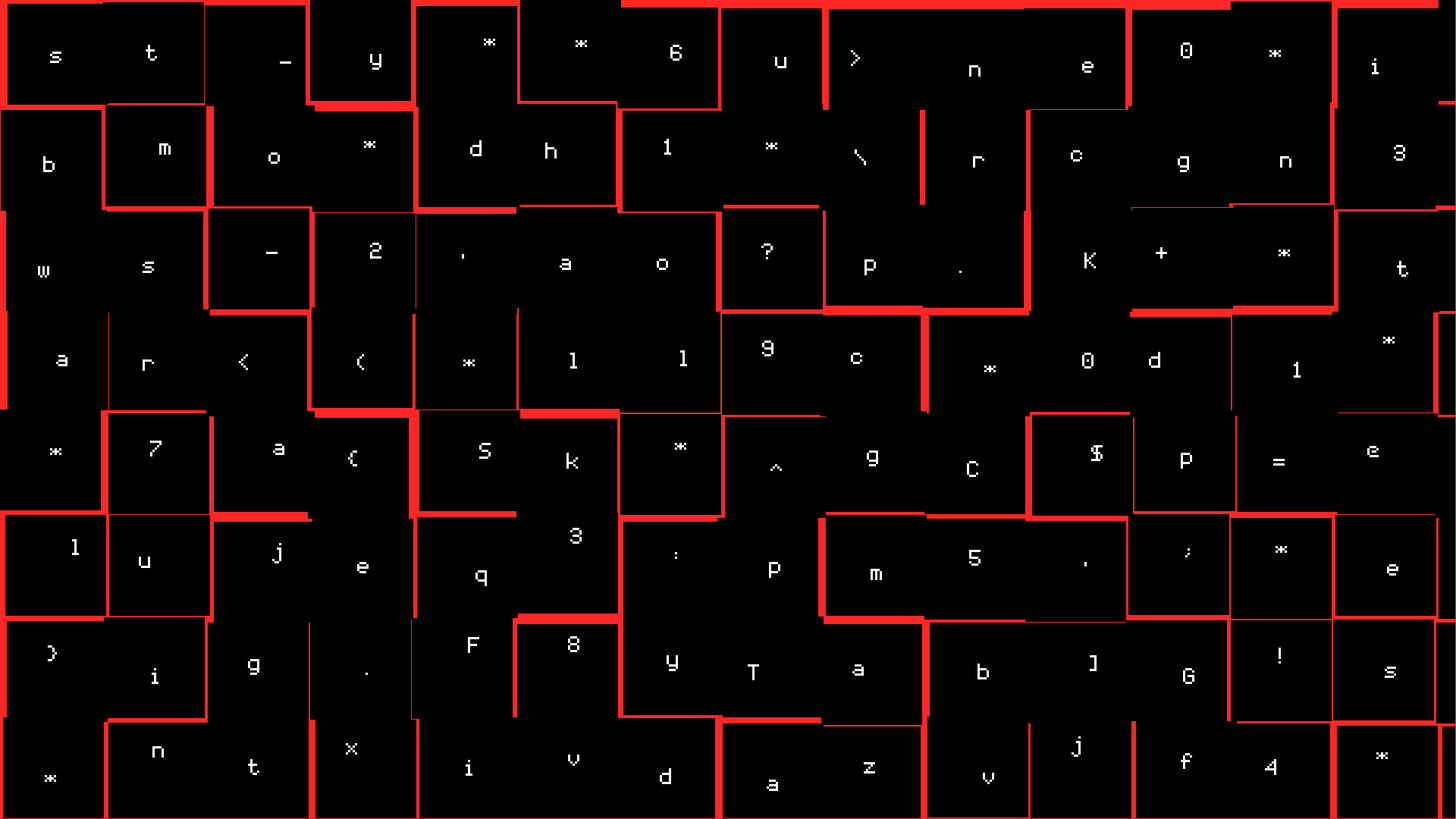
<style>
.page{position:relative;width:1456px;height:819px;background:#000000}
.page>*{position:absolute;margin:0}
.t1{font:36.4px "Coder's-Crux";color:#ffffff}
</style>
<div class="page">
<p class="t1" style="left:484px;top:39px;width:11px;height:6px">*</p>
<p class="t1" style="left:576px;top:40px;width:11px;height:7px">*</p>
<p class="t1" style="left:50px;top:52px;width:11px;height:11px">s</p>
<p class="t1" style="left:146px;top:45px;width:11px;height:16px">t</p>
<p class="t1" style="left:370px;top:54px;width:11px;height:16px">y</p>
<p class="t1" style="left:670px;top:45px;width:12px;height:16px">6</p>
<p class="t1" style="left:851px;top:50px;width:9px;height:16px">&gt;</p>
<p class="t1" style="left:1181px;top:42px;width:11px;height:16px">0</p>
<p class="t1" style="left:1269px;top:50px;width:12px;height:7px">*</p>
<p class="t1" style="left:775px;top:57px;width:11px;height:11px">u</p>
<p class="t1" style="left:969px;top:65px;width:12px;height:12px">n</p>
<p class="t1" style="left:1082px;top:61px;width:12px;height:12px">e</p>
<p class="t1" style="left:1372px;top:58px;width:7px;height:16px">i</p>
<p class="t1" style="left:159px;top:143px;width:12px;height:12px">m</p>
<p class="t1" style="left:364px;top:141px;width:11px;height:7px">*</p>
<p class="t1" style="left:470px;top:140px;width:12px;height:16px">d</p>
<p class="t1" style="left:545px;top:143px;width:12px;height:15px">h</p>
<p class="t1" style="left:664px;top:139px;width:7px;height:16px">1</p>
<p class="t1" style="left:766px;top:143px;width:11px;height:6px">*</p>
<p class="t1" style="left:855px;top:149px;width:11px;height:16px">\</p>
<p class="t1" style="left:1394px;top:145px;width:11px;height:16px">3</p>
<p class="t1" style="left:43px;top:156px;width:12px;height:16px">b</p>
<p class="t1" style="left:268px;top:152px;width:12px;height:12px">o</p>
<p class="t1" style="left:973px;top:156px;width:11px;height:12px">r</p>
<p class="t1" style="left:1071px;top:150px;width:11px;height:12px">c</p>
<p class="t1" style="left:1178px;top:156px;width:11px;height:16px">g</p>
<p class="t1" style="left:1280px;top:156px;width:11px;height:12px">n</p>
<p class="t1" style="left:370px;top:243px;width:11px;height:16px">2</p>
<p class="t1" style="left:761px;top:243px;width:12px;height:16px">?</p>
<p class="t1" style="left:1084px;top:253px;width:12px;height:15px">K</p>
<p class="t1" style="left:1156px;top:247px;width:11px;height:12px">+</p>
<p class="t1" style="left:1279px;top:249px;width:11px;height:7px">*</p>
<p class="t1" style="left:38px;top:266px;width:11px;height:12px">w</p>
<p class="t1" style="left:143px;top:262px;width:11px;height:11px">s</p>
<p class="t1" style="left:560px;top:259px;width:11px;height:11px">a</p>
<p class="t1" style="left:657px;top:259px;width:11px;height:11px">o</p>
<p class="t1" style="left:864px;top:259px;width:12px;height:16px">p</p>
<p class="t1" style="left:1397px;top:261px;width:11px;height:16px">t</p>
<p class="t1" style="left:762px;top:340px;width:11px;height:16px">9</p>
<p class="t1" style="left:1383px;top:337px;width:12px;height:7px">*</p>
<p class="t1" style="left:570px;top:353px;width:7px;height:16px">l</p>
<p class="t1" style="left:680px;top:350px;width:7px;height:16px">l</p>
<p class="t1" style="left:851px;top:353px;width:11px;height:11px">c</p>
<p class="t1" style="left:1082px;top:353px;width:12px;height:16px">0</p>
<p class="t1" style="left:1149px;top:352px;width:11px;height:16px">d</p>
<p class="t1" style="left:56px;top:355px;width:11px;height:11px">a</p>
<p class="t1" style="left:143px;top:359px;width:11px;height:12px">r</p>
<p class="t1" style="left:239px;top:354px;width:9px;height:16px">&lt;</p>
<p class="t1" style="left:357px;top:354px;width:7px;height:16px">(</p>
<p class="t1" style="left:463px;top:359px;width:12px;height:7px">*</p>
<p class="t1" style="left:984px;top:366px;width:12px;height:6px">*</p>
<p class="t1" style="left:1294px;top:362px;width:7px;height:16px">1</p>
<p class="t1" style="left:50px;top:448px;width:11px;height:7px">*</p>
<p class="t1" style="left:150px;top:441px;width:12px;height:16px">7</p>
<p class="t1" style="left:273px;top:444px;width:11px;height:11px">a</p>
<p class="t1" style="left:479px;top:443px;width:12px;height:16px">S</p>
<p class="t1" style="left:675px;top:443px;width:11px;height:7px">*</p>
<p class="t1" style="left:1091px;top:445px;width:12px;height:16px">$</p>
<p class="t1" style="left:1367px;top:446px;width:12px;height:11px">@</p>
<p class="t1" style="left:348px;top:450px;width:9px;height:16px">{</p>
<p class="t1" style="left:566px;top:453px;width:12px;height:16px">k</p>
<p class="t1" style="left:867px;top:450px;width:11px;height:16px">g</p>
<p class="t1" style="left:967px;top:461px;width:11px;height:16px">C</p>
<p class="t1" style="left:1181px;top:453px;width:11px;height:16px">p</p>
<p class="t1" style="left:1273px;top:459px;width:12px;height:7px">=</p>
<p class="t1" style="left:770px;top:464px;width:12px;height:7px">^</p>
<p class="t1" style="left:570px;top:528px;width:12px;height:16px">3</p>
<p class="t1" style="left:72px;top:539px;width:7px;height:16px">l</p>
<p class="t1" style="left:272px;top:543px;width:9px;height:20px">j</p>
<p class="t1" style="left:1275px;top:546px;width:12px;height:7px">*</p>
<p class="t1" style="left:139px;top:557px;width:11px;height:11px">u</p>
<p class="t1" style="left:675px;top:552px;width:2px;height:7px">:</p>
<p class="t1" style="left:969px;top:550px;width:12px;height:16px">5</p>
<p class="t1" style="left:1185px;top:548px;width:5px;height:9px">;</p>
<p class="t1" style="left:357px;top:562px;width:12px;height:11px">e</p>
<p class="t1" style="left:769px;top:562px;width:11px;height:16px">p</p>
<p class="t1" style="left:871px;top:569px;width:11px;height:11px">m</p>
<p class="t1" style="left:1387px;top:564px;width:11px;height:12px">e</p>
<p class="t1" style="left:475px;top:570px;width:12px;height:16px">q</p>
<p class="t1" style="left:468px;top:637px;width:11px;height:16px">F</p>
<p class="t1" style="left:568px;top:636px;width:11px;height:16px">8</p>
<p class="t1" style="left:48px;top:645px;width:9px;height:16px">}</p>
<p class="t1" style="left:1279px;top:648px;width:2px;height:16px">!</p>
<p class="t1" style="left:248px;top:659px;width:11px;height:16px">g</p>
<p class="t1" style="left:667px;top:655px;width:11px;height:16px">y</p>
<p class="t1" style="left:748px;top:664px;width:11px;height:16px">T</p>
<p class="t1" style="left:852px;top:664px;width:12px;height:12px">a</p>
<p class="t1" style="left:977px;top:664px;width:12px;height:15px">b</p>
<p class="t1" style="left:1090px;top:655px;width:7px;height:16px">]</p>
<p class="t1" style="left:152px;top:668px;width:6px;height:16px">i</p>
<p class="t1" style="left:1183px;top:668px;width:11px;height:16px">G</p>
<p class="t1" style="left:1385px;top:667px;width:11px;height:11px">s</p>
<p class="t1" style="left:1072px;top:736px;width:9px;height:21px">j</p>
<p class="t1" style="left:152px;top:746px;width:12px;height:12px">n</p>
<p class="t1" style="left:346px;top:743px;width:11px;height:12px">x</p>
<p class="t1" style="left:248px;top:759px;width:11px;height:16px">t</p>
<p class="t1" style="left:466px;top:760px;width:6px;height:16px">i</p>
<p class="t1" style="left:568px;top:755px;width:11px;height:11px">v</p>
<p class="t1" style="left:1181px;top:753px;width:11px;height:16px">f</p>
<p class="t1" style="left:1265px;top:759px;width:11px;height:16px">4</p>
<p class="t1" style="left:1376px;top:752px;width:12px;height:7px">*</p>
<p class="t1" style="left:660px;top:768px;width:11px;height:16px">d</p>
<p class="t1" style="left:864px;top:762px;width:11px;height:11px">z</p>
<p class="t1" style="left:983px;top:773px;width:11px;height:11px">v</p>
<p class="t1" style="left:45px;top:775px;width:11px;height:7px">*</p>
<p class="t1" style="left:767px;top:780px;width:11px;height:11px">a</p>
</div>
